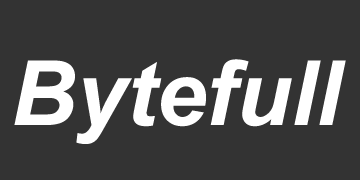
<style>
.page{position:relative;width:360px;height:180px;background:#333333}
.page>*{position:absolute;margin:0}
.t1{font:90px "Arial-BoldItalicMT";color:#ffffff}
</style>
<div class="page">
<p class="t1" style="left:14px;top:59px;width:332px;height:85px">Bytefull</p>
</div>
